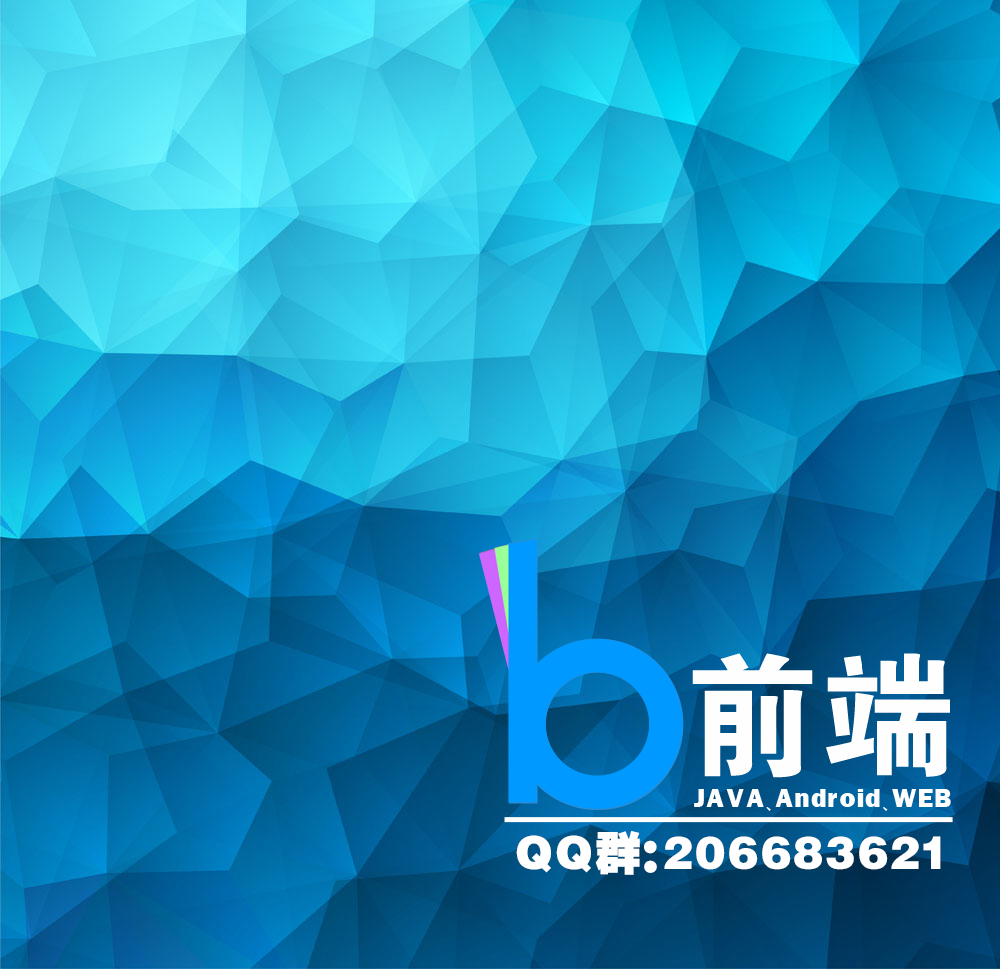
<style>
.page{position:relative;width:1000px;height:969px}
.page>*{position:absolute;margin:0}
.t1{font:133.6px "FZDHTJW--GB1-0";letter-spacing:0.1em;color:#fefefe}
.t2{font:27.1px "FranklinGothic-Heavy";letter-spacing:0.1em;color:#fefefe}
.t3{font:27.1px "HYg2gj";letter-spacing:0.1em;color:#fefefe}
.t4{font:45.4px "FZCCHJW--GB1-0";letter-spacing:0.1em;color:#ffffff}
</style>
<div class="page">
<p class="t1" style="left:692px;top:653px;width:258px;height:125px">前端</p>
<p class="t2" style="left:694px;top:789px;width:257px;height:22px">JAVA<span class="t3">、</span>Android<span class="t3">、</span>WEB</p>
<p class="t4" style="left:516px;top:831px;width:425px;height:44px">QQ群：206683621</p>
</div>
